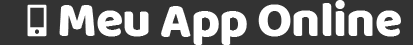
<style>
.page{position:relative;width:413px;height:45px;background:#333333}
.page>*{position:absolute;margin:0}
.t1{font:12px/104.2px "Baloo";letter-spacing:-0.015em;color:#ffffff}
</style>
<div class="page">
<p class="t1" style="left:59px;top:0px;width:342px;height:45px;text-align:center">Meu App Online</p>
</div>
